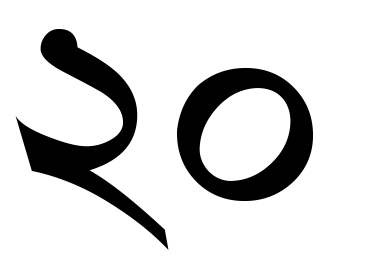
<style>
.page{position:relative;width:374px;height:262px;background:#ffffff}
.page>*{position:absolute;margin:0}
.t1{font:300px "KalpurushANSI";color:#000000}
</style>
<div class="page">
<p class="t1" style="left:15px;top:29px;width:298px;height:221px">20</p>
</div>
